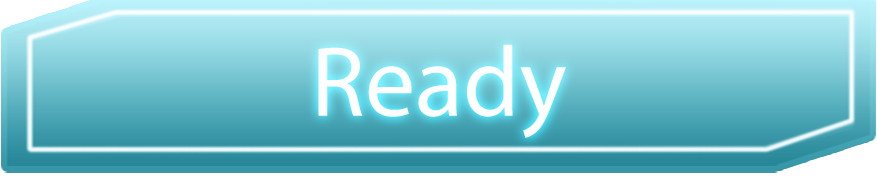
<style>
.page{position:relative;width:877px;height:176px}
.page>*{position:absolute;margin:0}
.t1{font:100px "MyriadPro-Regular";color:#fffefe}
</style>
<div class="page">
<p class="t1" style="left:318px;top:44px;width:248px;height:94px">Ready</p>
</div>
